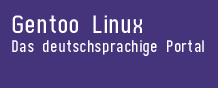
<style>
.page{position:relative;width:218px;height:88px;background:#45347b}
.page>*{position:absolute;margin:0}
.t1{font:32px/18.7px "ChicaMono";color:#ffffff}
.t2{font:48px/18.7px "ChicaMono";color:#ffffff}
</style>
<div class="page">
<p class="t1" style="left:12px;top:15px;width:192px;height:41px"><span class="t2">Gentoo Linux<br></span>Das deutschsprachige Portal</p>
</div>
